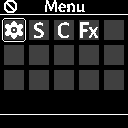
<style>
.page{position:relative;width:128px;height:128px;background:#000000}
.page>*{position:absolute;margin:0}
.t1{font:18px "AlegreyaSans-Medium";color:#ffffff}
.t2{font:24px "AlegreyaSans-Medium";color:#ffffff}
</style>
<div class="page">
<p class="t1" style="left:45px;top:0px;width:40px;height:12px">Menu</p>
<p class="t2" style="left:33px;top:22px;width:11px;height:17px">S</p>
<p class="t2" style="left:57px;top:22px;width:12px;height:17px">C</p>
<p class="t2" style="left:80px;top:22px;width:19px;height:17px">Fx</p>
</div>
